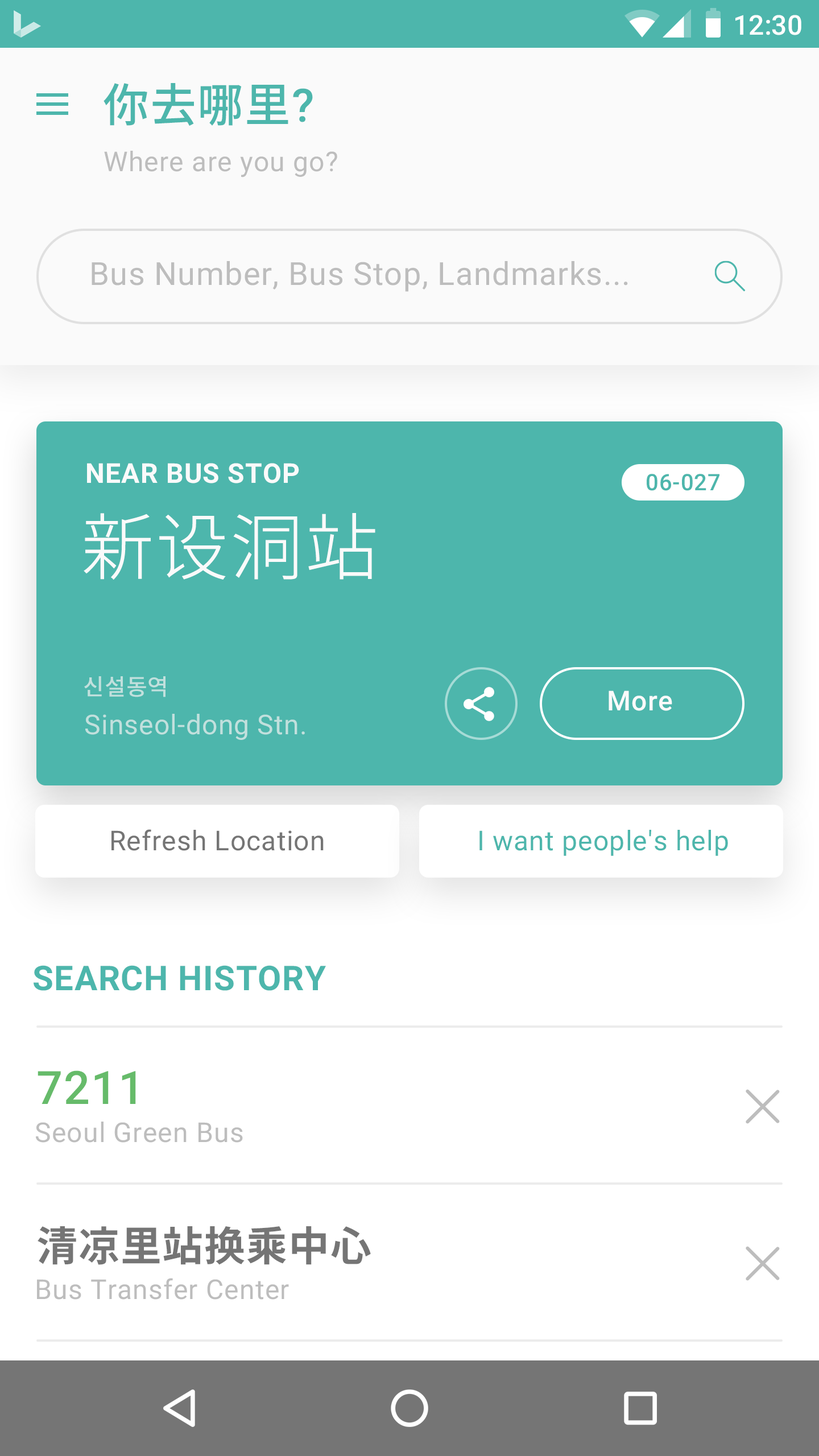
<style>
.page{position:relative;width:819px;height:1456px;background:#ffffff}
.page>*{position:absolute;margin:0}
.t1{font:27.3px "Roboto-Medium";color:#ffffff}
.t2{font:46.1px "NotoSansCJKkr-Medium";letter-spacing:0.025em;color:#4db6ac}
.t3{font:46.1px "Roboto-Medium";letter-spacing:0.025em;color:#4db6ac}
.t4{font:27.3px "Roboto-Regular";letter-spacing:0.025em;color:#bdbdbd}
.t5{font:31.8px "Roboto-Regular";letter-spacing:0.025em;color:#bdbdbd}
.t6{font:27.3px "Roboto-Bold";letter-spacing:0.025em;color:#fafafa}
.t7{font:22.7px "Roboto-Medium";letter-spacing:0.025em;color:#4db6ac}
.t8{font:72.8px "NotoSansCJKkr-Light";letter-spacing:0.025em;color:#fafafa}
.t9{font:22.7px "NotoSansCJKkr-Medium";letter-spacing:0.025em;color:#c1e0dd}
.t10{font:27.3px "Roboto-Medium";letter-spacing:0.025em;color:#fafafa}
.t11{font:27.3px "Roboto-Regular";letter-spacing:0.025em;color:#c1e0dd}
.t12{font:27.3px "Roboto-Regular";letter-spacing:0.025em;color:#757575}
.t13{font:27.3px "Roboto-Regular";letter-spacing:0.025em;color:#4db6ac}
.t14{font:34.1px "Roboto-Bold";letter-spacing:0.025em;color:#4db6ac}
.t15{font:46.1px "Roboto-Medium";letter-spacing:0.025em;color:#66bb6a}
.t16{font:40.9px "NotoSansCJKkr-Bold";letter-spacing:0.025em;color:#757575}
</style>
<div class="page">
<p class="t1" style="left:735px;top:15px;width:66px;height:20px">12:30</p>
<p class="t2" style="left:104px;top:83px;width:209px;height:43px">你去哪里<span class="t3">?</span></p>
<p class="t4" style="left:104px;top:151px;width:233px;height:26px">Where are you go?</p>
<p class="t5" style="left:92px;top:261px;width:536px;height:31px">Bus Number, Bus Stop, Landmarks...</p>
<p class="t6" style="left:87px;top:463px;width:212px;height:20px">NEAR BUS STOP</p>
<p class="t7" style="left:647px;top:474px;width:72px;height:17px">06-027</p>
<p class="t8" style="left:84px;top:513px;width:291px;height:67px">新设洞站</p>
<p class="t9" style="left:84px;top:676px;width:82px;height:21px">신설동역</p>
<p class="t10" style="left:609px;top:690px;width:63px;height:21px">More</p>
<p class="t11" style="left:85px;top:714px;width:220px;height:26px">Sinseol-dong Stn.</p>
<p class="t12" style="left:111px;top:829px;width:213px;height:22px">Refresh Location</p>
<p class="t13" style="left:479px;top:830px;width:249px;height:26px">I want people's help</p>
<p class="t14" style="left:34px;top:965px;width:292px;height:26px">SEARCH HISTORY</p>
<p class="t15" style="left:38px;top:1070px;width:98px;height:34px">7211</p>
<p class="t4" style="left:36px;top:1122px;width:207px;height:21px">Seoul Green Bus</p>
<p class="t16" style="left:38px;top:1226px;width:333px;height:39px">清凉里站换乘中心</p>
<p class="t4" style="left:37px;top:1278px;width:252px;height:22px">Bus Transfer Center</p>
</div>
